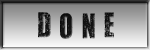
<style>
.page{position:relative;width:150px;height:50px}
.page>*{position:absolute;margin:0}
.t1{font:29px "YouAreLoved";color:#141414}
</style>
<div class="page">
<p class="t1" style="left:38px;top:12px;width:76px;height:27px">D O N E</p>
</div>
